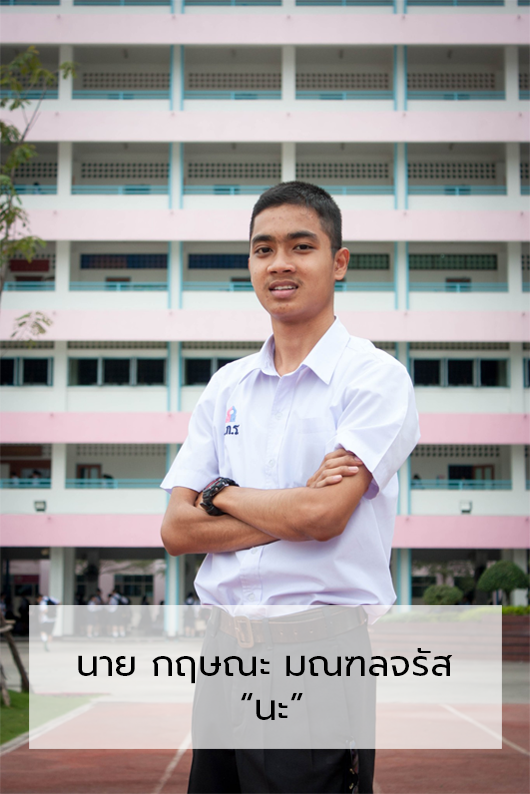
<style>
.page{position:relative;width:530px;height:794px}
.page>*{position:absolute;margin:0}
.t1{font:36.7px "Prompt-Regular";color:#000000}
</style>
<div class="page">
<p class="t1" style="left:78px;top:648px;width:375px;height:72px">นาย กฤษณะ มณฑลจรัส<br>            “นะ”</p>
</div>
